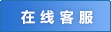
<style>
.page{position:relative;width:111px;height:32px}
.page>*{position:absolute;margin:0}
.t1{font:14px "MicrosoftYaHei-Bold";letter-spacing:0.38em;color:#ffffff}
</style>
<div class="page">
<p class="t1" style="left:21px;top:10px;width:72px;height:14px">在线客服</p>
</div>
